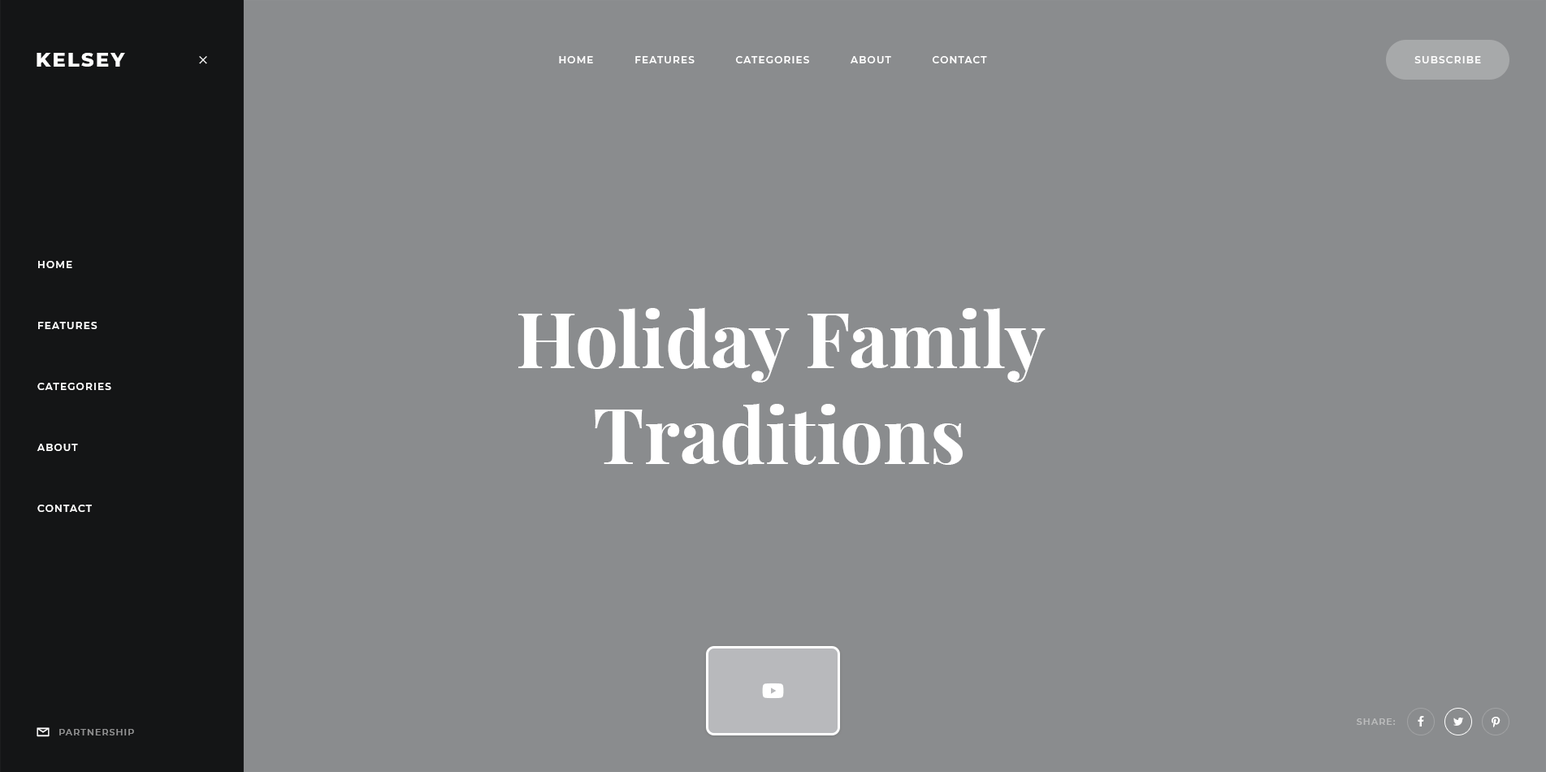
<style>
.page{position:relative;width:1546px;height:772px;background:#8a8c8e}
.page>*{position:absolute;margin:0}
.t1{font:19.5px "Montserrat-ExtraBold";letter-spacing:0.1em;color:#ffffff;text-transform:uppercase}
.t2{font:9.7px "Montserrat-SemiBold";letter-spacing:0.1em;color:#ffffff;text-transform:uppercase}
.t3{font:9.7px/60.9px "Montserrat-SemiBold";letter-spacing:0.1em;color:#ffffff;text-transform:uppercase}
.t4{font:76.3px/95.8px "PlayfairDisplay-Bold";color:#ffffff}
.t5{font:8.9px "Montserrat-SemiBold";letter-spacing:0.1em;color:#bcbdbd;text-transform:uppercase}
.t6{font:8.9px "Montserrat-SemiBold";letter-spacing:0.1em;color:#909091;text-transform:uppercase}
</style>
<div class="page">
<p class="t1" style="left:37px;top:53px;width:88px;height:14px">Kelsey</p>
<p class="t1" style="left:37px;top:53px;width:88px;height:14px">Kelsey</p>
<p class="t2" style="left:559px;top:56px;width:428px;height:7px">Home           Features           Categories           About           Contact</p>
<p class="t2" style="left:1414px;top:56px;width:67px;height:7px">Subscribe</p>
<p class="t3" style="left:37px;top:261px;width:74px;height:251px">Home<br>Features<br>Categories<br>About<br>Contact</p>
<p class="t4" style="left:518px;top:307px;width:527px;height:158px;text-align:center">Holiday Family<br>Traditions</p>
<p class="t5" style="left:1356px;top:718px;width:38px;height:6px">Share:</p>
<p class="t6" style="left:59px;top:728px;width:75px;height:7px">Partnership</p>
<p class="t6" style="left:59px;top:728px;width:75px;height:7px">Partnership</p>
</div>
